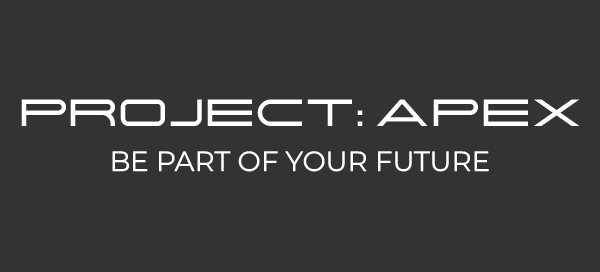
<style>
.page{position:relative;width:600px;height:272px;background:#333333}
.page>*{position:absolute;margin:0}
.t1{font:38.1px "Centauri";color:#ffffff}
.t2{font:27.7px "MontserratRoman-Regular";color:#ffffff}
</style>
<div class="page">
<p class="t1" style="left:21px;top:99px;width:559px;height:27px">PROJECT: APEX</p>
<p class="t2" style="left:112px;top:151px;width:377px;height:21px">BE PART OF YOUR FUTURE</p>
</div>
